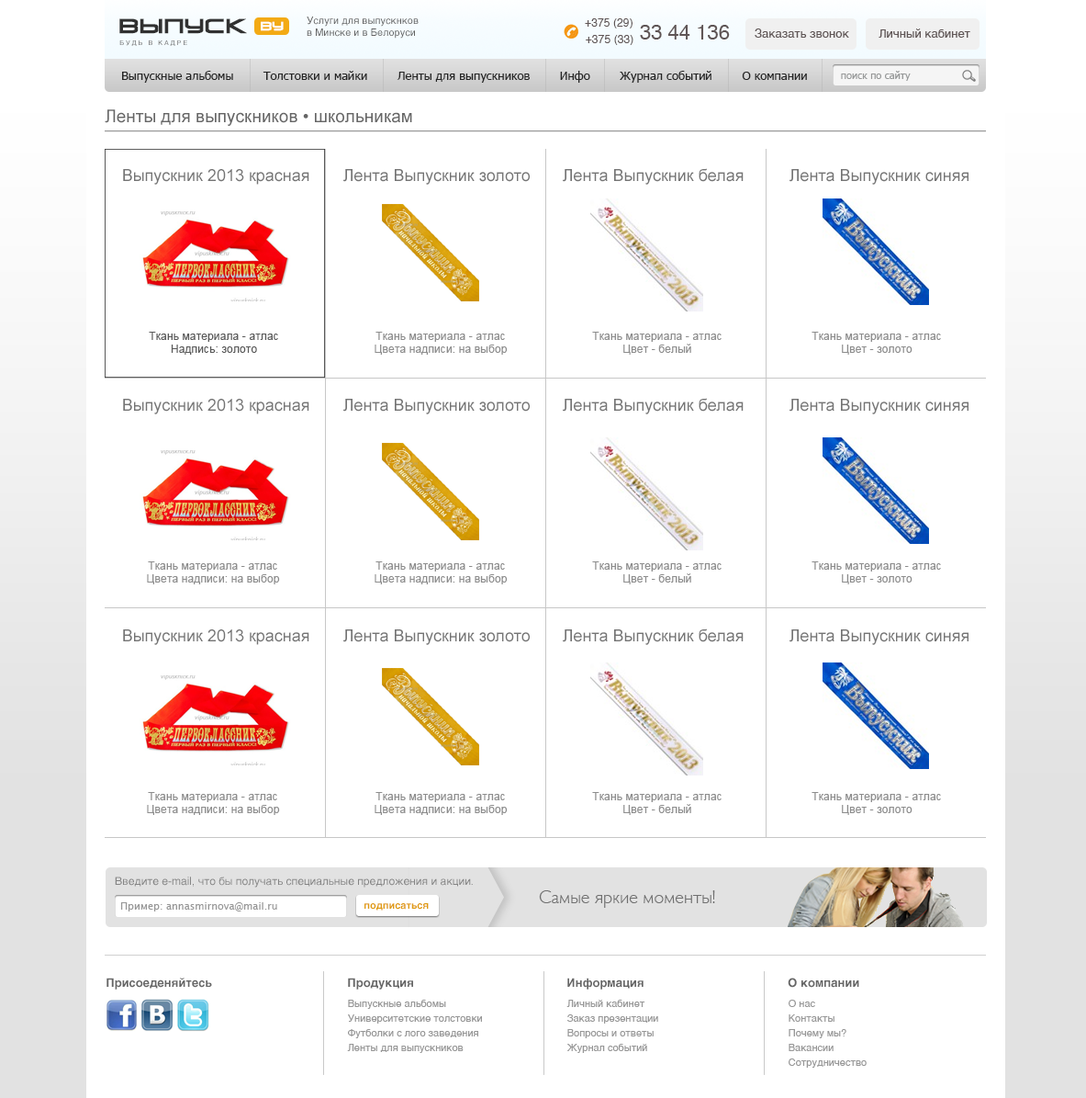
<style>
.page{position:relative;width:1086px;height:1098px;background:#ffffff}
.page>*{position:absolute;margin:0}
.t1{font:10.1px "Helvetica";color:#616161}
.t2{font:19.3px "VenusRisingCyrillic";letter-spacing:0.01em;color:#313131;font-weight:bold}
.t3{font:11.6px "VenusRisingCyrillic";letter-spacing:0.01em;color:#ffffff;font-weight:bold}
.t4{font:11px "Helvetica";letter-spacing:0.01em;color:#5f5555}
.t5{font:20.2px "Helvetica";color:#5f5555}
.t6{font:11.9px "Helvetica";color:#5f5555}
.t7{font:6.4px "Helvetica";letter-spacing:0.3em;color:#6d6d6d;text-transform:uppercase}
.t8{font:11.9px "Tahoma";color:#242424}
.t9{font:10.1px "Tahoma";color:#979999}
.t10{font:17.4px "ArialMT";color:#666666}
.t11{font:16.5px "ArialMT";color:#747474}
.t12{font:11px "ArialMT";letter-spacing:0.01em;color:#595959}
.t13{font:11px "ArialMT";letter-spacing:0.01em;color:#8d8d8d}
.t14{font:11px "Helvetica";color:#848484}
.t15{font:18.4px "GillSans-Light";color:#6f6f6f}
.t16{font:10.1px "LucidaGrande";color:#979797}
.t17{font:10.1px "Helvetica-Bold";color:#e09b0e}
.t18{font:11.9px "Helvetica-Bold";color:#666666}
.t19{font:10.1px/14.7px "Helvetica";color:#979797}
</style>
<div class="page">
<p class="t1" style="left:307px;top:17px;width:112px;height:22px">Услуги для выпускнков<br>в Минске и в Белоруси</p>
<p class="t2" style="left:119px;top:18px;width:128px;height:16px">ВЫпуск</p>
<p class="t3" style="left:261px;top:21px;width:23px;height:10px">by</p>
<p class="t4" style="left:585px;top:18px;width:48px;height:10px">+375 (29)</p>
<p class="t5" style="left:640px;top:25px;width:90px;height:14px">33 44 136</p>
<p class="t6" style="left:755px;top:28px;width:216px;height:10px">Заказать звонок         Личный кабинет</p>
<p class="t7" style="left:119px;top:40px;width:68px;height:6px">будь в кадре</p>
<p class="t4" style="left:586px;top:35px;width:48px;height:10px">+375 (33)</p>
<p class="t8" style="left:122px;top:71px;width:685px;height:12px">Выпускные альбомы        Толстовки и майки        Ленты для выпускников        Инфо        Журнал событий        О компании</p>
<p class="t9" style="left:841px;top:71px;width:70px;height:10px">поиск по сайту</p>
<p class="t10" style="left:105px;top:109px;width:307px;height:17px">Ленты для выпускников • школьникам</p>
<p class="t11" style="left:123px;top:169px;width:187px;height:16px">Выпускник 2013 красная</p>
<p class="t11" style="left:343px;top:169px;width:187px;height:16px">Лента Выпускник золото</p>
<p class="t11" style="left:563px;top:168px;width:181px;height:17px">Лента Выпускник белая</p>
<p class="t11" style="left:790px;top:169px;width:179px;height:16px">Лента Выпускник синяя</p>
<p class="t12" style="left:149px;top:332px;width:129px;height:23px;text-align:center">Ткань материала - атлас<br>Надпись: золото</p>
<p class="t13" style="left:375px;top:332px;width:133px;height:23px;text-align:center">Ткань материала - атлас<br>Цвета надписи: на выбор</p>
<p class="t13" style="left:592px;top:332px;width:130px;height:23px;text-align:center">Ткань материала - атлас<br>Цвет - белый</p>
<p class="t13" style="left:812px;top:332px;width:129px;height:23px;text-align:center">Ткань материала - атлас<br>Цвет - золото</p>
<p class="t11" style="left:123px;top:399px;width:187px;height:15px">Выпускник 2013 красная</p>
<p class="t11" style="left:343px;top:399px;width:187px;height:15px">Лента Выпускник золото</p>
<p class="t11" style="left:563px;top:398px;width:181px;height:16px">Лента Выпускник белая</p>
<p class="t11" style="left:790px;top:399px;width:179px;height:15px">Лента Выпускник синяя</p>
<p class="t13" style="left:147px;top:561px;width:133px;height:23px;text-align:center">Ткань материала - атлас<br>Цвета надписи: на выбор</p>
<p class="t13" style="left:375px;top:561px;width:133px;height:23px;text-align:center">Ткань материала - атлас<br>Цвета надписи: на выбор</p>
<p class="t13" style="left:592px;top:561px;width:130px;height:23px;text-align:center">Ткань материала - атлас<br>Цвет - белый</p>
<p class="t13" style="left:812px;top:561px;width:129px;height:23px;text-align:center">Ткань материала - атлас<br>Цвет - золото</p>
<p class="t11" style="left:123px;top:629px;width:187px;height:16px">Выпускник 2013 красная</p>
<p class="t11" style="left:343px;top:629px;width:187px;height:16px">Лента Выпускник золото</p>
<p class="t11" style="left:563px;top:628px;width:181px;height:17px">Лента Выпускник белая</p>
<p class="t11" style="left:790px;top:629px;width:179px;height:16px">Лента Выпускник синяя</p>
<p class="t13" style="left:147px;top:792px;width:133px;height:23px;text-align:center">Ткань материала - атлас<br>Цвета надписи: на выбор</p>
<p class="t13" style="left:375px;top:792px;width:133px;height:23px;text-align:center">Ткань материала - атлас<br>Цвета надписи: на выбор</p>
<p class="t13" style="left:592px;top:792px;width:130px;height:23px;text-align:center">Ткань материала - атлас<br>Цвет - белый</p>
<p class="t13" style="left:812px;top:792px;width:129px;height:23px;text-align:center">Ткань материала - атлас<br>Цвет - золото</p>
<p class="t14" style="left:115px;top:876px;width:358px;height:11px">Введите e-mail, что бы получать специальные предложения и акции.</p>
<p class="t15" style="left:539px;top:890px;width:176px;height:17px">Самые яркие моменты!</p>
<p class="t16" style="left:120px;top:902px;width:157px;height:9px">Пример: annasmirnova@mail.ru</p>
<p class="t17" style="left:365px;top:903px;width:64px;height:7px">подписаться</p>
<p class="t18" style="left:107px;top:977px;width:105px;height:12px">Присоеденяйтесь</p>
<p class="t18" style="left:348px;top:977px;width:65px;height:12px">Продукция</p>
<p class="t18" style="left:568px;top:977px;width:76px;height:12px">Информация</p>
<p class="t18" style="left:788px;top:977px;width:72px;height:10px">О компании</p>
<p class="t19" style="left:347px;top:999px;width:135px;height:54px">Выпускные альбомы<br>Университетские толстовки<br>Футболки с лого заведения<br>Ленты для выпускников</p>
<p class="t19" style="left:567px;top:999px;width:92px;height:54px">Личный кабинет<br>Заказ презентации<br>Вопросы и ответы<br>Журнал событий</p>
<p class="t19" style="left:789px;top:999px;width:78px;height:68px">О нас<br>Контакты<br>Почему мы? <br>Вакансии<br>Сотрудничество</p>
</div>
